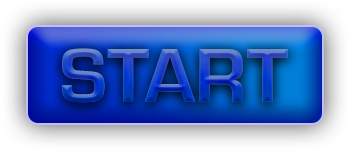
<style>
.page{position:relative;width:350px;height:150px}
.page>*{position:absolute;margin:0}
.t1{font:79.2px "Eurostile-Bol"}
</style>
<div class="page">
<p class="t1" style="left:61px;top:48px;width:227px;height:55px">START</p>
<p class="t1" style="left:61px;top:48px;width:227px;height:55px">START</p>
</div>
